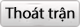
<style>
.page{position:relative;width:80px;height:27px}
.page>*{position:absolute;margin:0}
.t1{font:16px "MyriadPro-Regular";letter-spacing:-0.02em;color:#0c0c0c;font-weight:bold}
</style>
<div class="page">
<p class="t1" style="left:5px;top:7px;width:70px;height:15px">Thoát trận</p>
</div>
